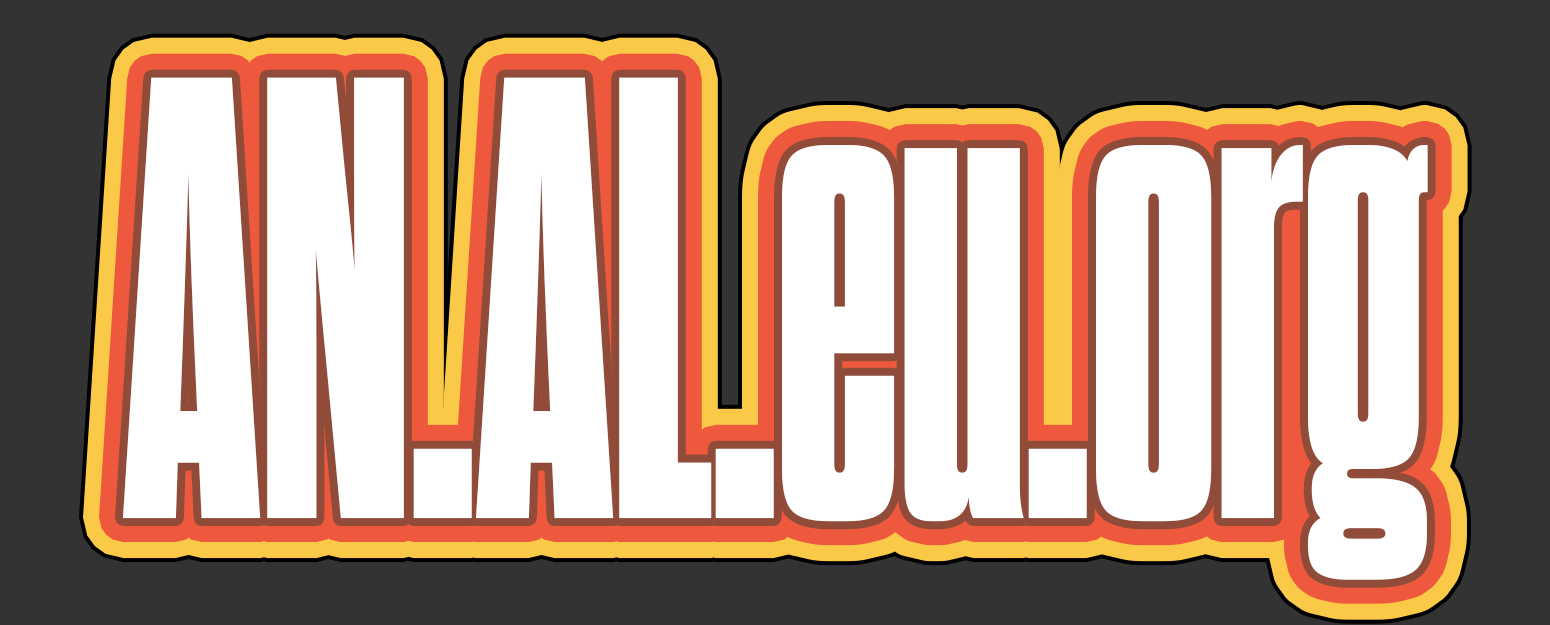
<style>
.page{position:relative;width:1550px;height:625px;background:#ffffff}
.page>*{position:absolute;margin:0}
.t1{font:629px "DharmaGothicC-Heavy";color:#ffffff}
</style>
<div class="page">
<p class="t1" style="left:123px;top:77px;width:1305px;height:503px">AN.AL.eu.org</p>
</div>
